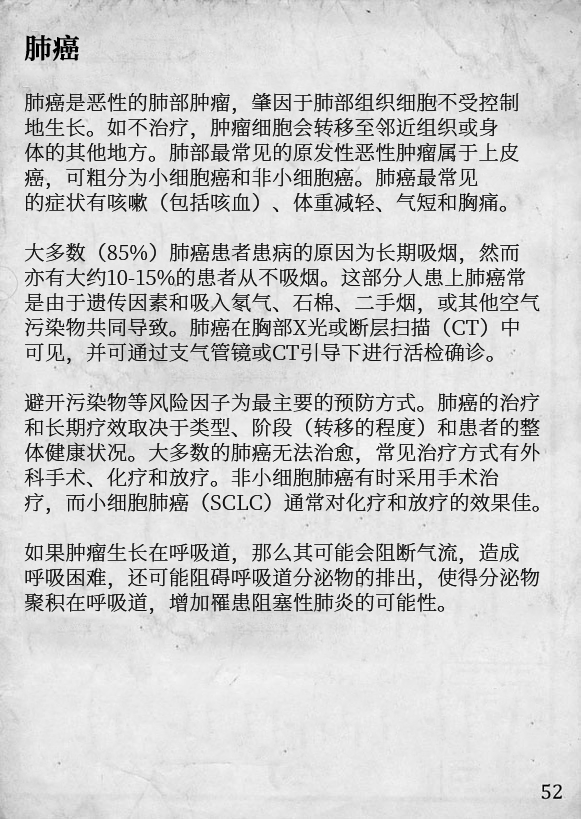
<style>
.page{position:relative;width:581px;height:819px}
.page>*{position:absolute;margin:0}
.t1{font:20.2px/25px "SourceHanSerifCN-ExtraLight";letter-spacing:0.02em;color:#111111}
.t2{font:27.2px/29px "SourceHanSerifCN-SemiBold";letter-spacing:0.02em;color:#000000;font-weight:bold}
</style>
<div class="page">
<p class="t1" style="left:24px;top:34px;width:516px;height:580px"><span class="t2">肺癌<br><br></span>肺癌是恶性的肺部肿瘤，肇因于肺部组织细胞不受控制<br>地生长。如不治疗，肿瘤细胞会转移至邻近组织或身<br>体的其他地方。肺部最常见的原发性恶性肿瘤属于上皮<br>癌，可粗分为小细胞癌和非小细胞癌。肺癌最常见<br>的症状有咳嗽（包括咳血）、体重减轻、气短和胸痛。<br><br>大多数（85%）肺癌患者患病的原因为长期吸烟，然而<br>亦有大约10-15%的患者从不吸烟。这部分人患上肺癌常<br>是由于遗传因素和吸入氡气、石棉、二手烟，或其他空气<br>污染物共同导致。肺癌在胸部X光或断层扫描（CT）中<br>可见，并可通过支气管镜或CT引导下进行活检确诊。<br><br>避开污染物等风险因子为最主要的预防方式。肺癌的治疗<br>和长期疗效取决于类型、阶段（转移的程度）和患者的整<br>体健康状况。大多数的肺癌无法治愈，常见治疗方式有外<br>科手术、化疗和放疗。非小细胞肺癌有时采用手术治<br>疗，而小细胞肺癌（SCLC）通常对化疗和放疗的效果佳。<br><br>如果肿瘤生长在呼吸道，那么其可能会阻断气流，造成<br>呼吸困难，还可能阻碍呼吸道分泌物的排出，使得分泌物<br>聚积在呼吸道，增加罹患阻塞性肺炎的可能性。</p>
</div>
